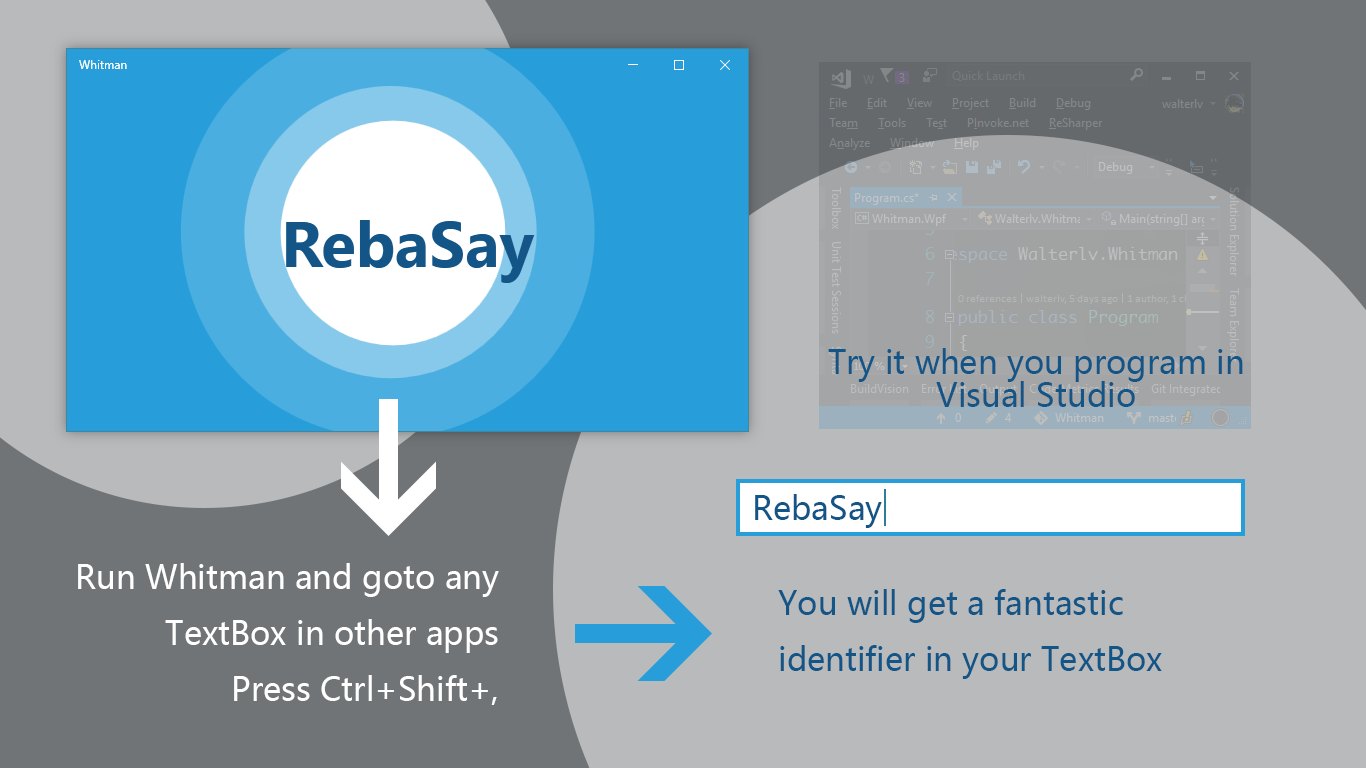
<style>
.page{position:relative;width:1366px;height:768px;background:#b8babb}
.page>*{position:absolute;margin:0}
.t1{font:32px/33.3px "MicrosoftYaHei";color:#145587}
.t2{font:32px "MicrosoftYaHei";color:#145587}
.t3{font:32px "MicrosoftYaHei";color:#ffffff}
</style>
<div class="page">
<p class="t1" style="left:828px;top:348px;width:415px;height:59px;text-align:center">Try it when you program in<br>Visual Studio</p>
<p class="t2" style="left:755px;top:494px;width:127px;height:34px">RebaSay</p>
<p class="t3" style="left:78px;top:563px;width:421px;height:142px;text-align:right">Run Whitman and goto any<br>TextBox in other apps<br>Press Ctrl+Shift+,</p>
<p class="t2" style="left:778px;top:589px;width:384px;height:90px">You will get a fantastic<br>identifier in your TextBox</p>
</div>
